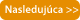
<style>
.page{position:relative;width:80px;height:20px;background:#e68d00}
.page>*{position:absolute;margin:0}
.t1{font:11px "MyriadPro-Semibold";color:#ffffff}
</style>
<div class="page">
<p class="t1" style="left:5px;top:5px;width:74px;height:11px">Nasledujúca &gt;&gt;</p>
</div>
